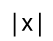
<style>
.page{position:relative;width:53px;height:41px;background:#ffffff}
.page>*{position:absolute;margin:0}
.t1{font:23.7px "DroidSans";color:#000000}
</style>
<div class="page">
<p class="t1" style="left:13px;top:12px;width:28px;height:25px">|x|</p>
</div>
